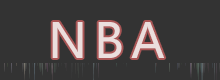
<style>
.page{position:relative;width:220px;height:80px;background:#333333}
.page>*{position:absolute;margin:0}
.t1{font:47.6px "MicrosoftYaHei";letter-spacing:0.14em;color:#ebdedd}
</style>
<div class="page">
<p class="t1" style="left:52px;top:22px;width:113px;height:36px">NBA</p>
</div>
